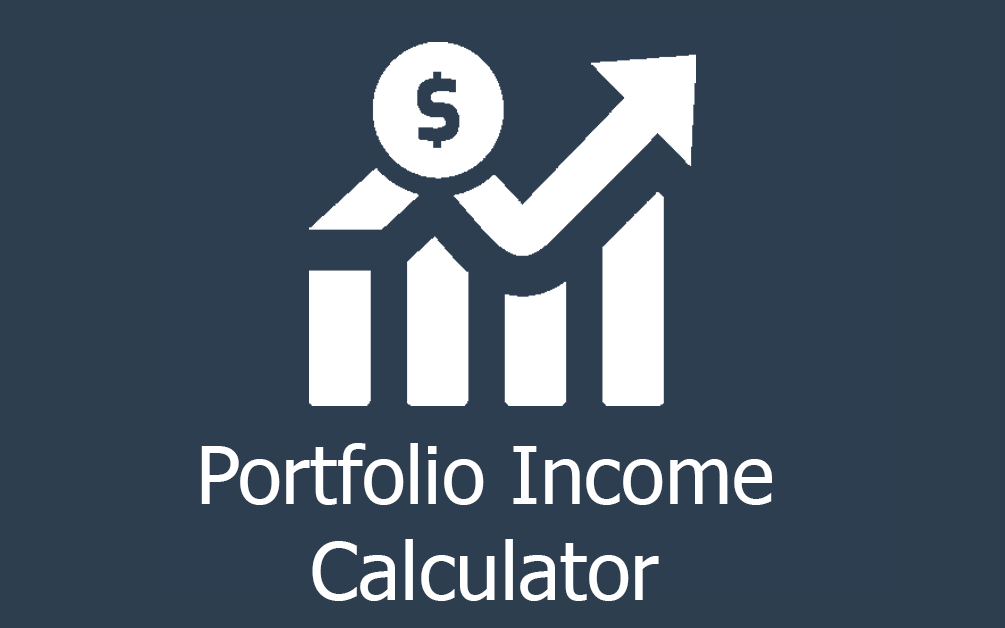
<style>
.page{position:relative;width:1005px;height:628px;background:#2d3e50}
.page>*{position:absolute;margin:0}
.t1{font:80px "Tahoma";color:#ffffff}
</style>
<div class="page">
<p class="t1" style="left:201px;top:443px;width:571px;height:158px;text-align:center">Portfolio Income Calculator</p>
</div>
